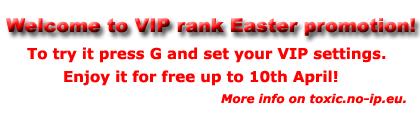
<style>
.page{position:relative;width:420px;height:120px;background:#ffffff}
.page>*{position:absolute;margin:0}
.t1{font:19px "Arial-Black"}
.t2{font:15px "Verdana-Bold";color:#fe0000}
.t3{font:12px "Verdana-BoldItalic";color:#fe0000}
</style>
<div class="page">
<p class="t1" style="left:6px;top:18px;width:409px;height:18px">Welcome to VIP rank Easter promotion!</p>
<p class="t2" style="left:27px;top:47px;width:359px;height:16px">To try it press G and set your VIP settings.</p>
<p class="t2" style="left:64px;top:70px;width:274px;height:16px">Enjoy it for free up to 10th April!</p>
<p class="t3" style="left:221px;top:93px;width:185px;height:13px">More info on toxic.no-ip.eu.</p>
</div>
